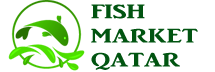
<style>
.page{position:relative;width:215px;height:72px;background:#ffffff}
.page>*{position:absolute;margin:0}
.t1{font:20.2px "ARJULIAN";color:#015411;scale:1.34 1}
</style>
<div class="page">
<p class="t1" style="left:91px;top:4px;width:107px;height:66px">FISH<br>MARKET<br>QATAR</p>
</div>
